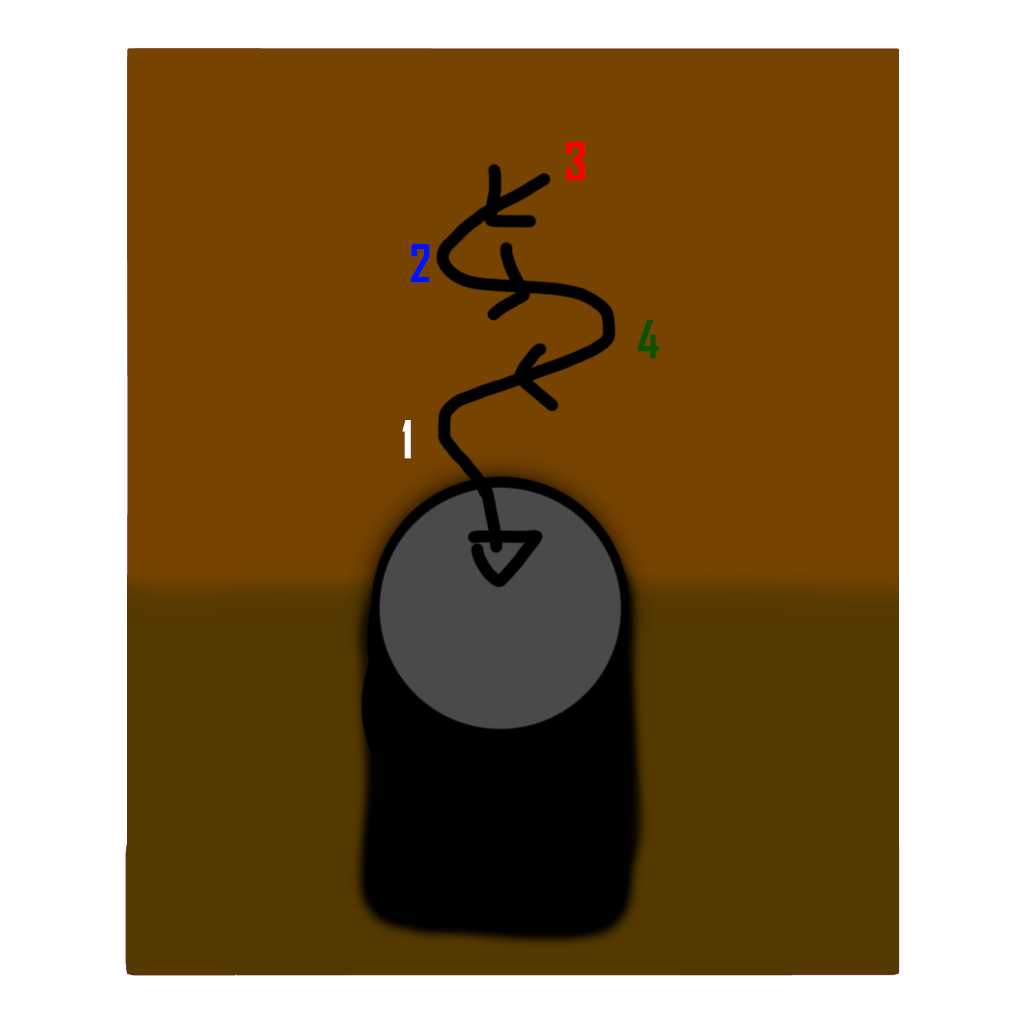
<style>
.page{position:relative;width:1024px;height:1024px;background:#764300}
.page>*{position:absolute;margin:0}
.t1{font:50px "AgencyFB-Bold";letter-spacing:-0.04em;color:#ff0000}
.t2{font:50px "AgencyFB-Bold";letter-spacing:-0.04em;color:#0012ff}
.t3{font:50px "AgencyFB-Bold";letter-spacing:-0.04em;color:#0a5200}
.t4{font:50px "AgencyFB-Bold";letter-spacing:-0.04em;color:#ffffff}
</style>
<div class="page">
<p class="t1" style="left:566px;top:142px;width:19px;height:39px">3</p>
<p class="t2" style="left:410px;top:244px;width:20px;height:39px">2</p>
<p class="t3" style="left:637px;top:320px;width:22px;height:39px">4</p>
<p class="t4" style="left:402px;top:420px;width:9px;height:39px">1</p>
</div>
